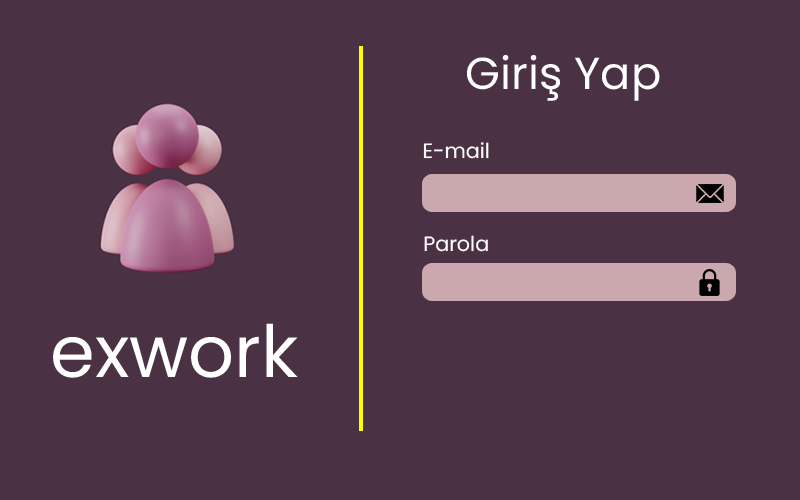
<style>
.page{position:relative;width:800px;height:500px;background:#4a3144}
.page>*{position:absolute;margin:0}
.t1{font:44.8px "Poppins-Regular";color:#ffffff}
.t2{font:20.7px "Poppins-Regular";color:#ffffff}
.t3{font:72px "Poppins-Regular";color:#ffffff}
</style>
<div class="page">
<p class="t1" style="left:467px;top:55px;width:193px;height:46px">Giriş Yap</p>
<p class="t2" style="left:423px;top:142px;width:66px;height:17px">E-mail</p>
<p class="t2" style="left:424px;top:235px;width:64px;height:17px">Parola</p>
<p class="t3" style="left:53px;top:323px;width:245px;height:55px">exwork</p>
</div>
